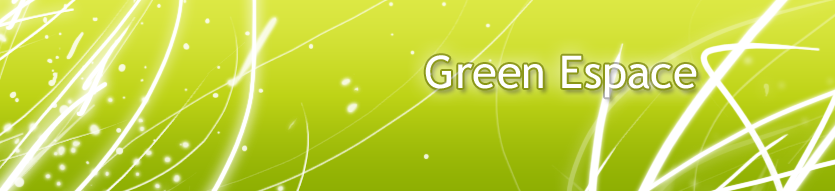
<style>
.page{position:relative;width:835px;height:191px}
.page>*{position:absolute;margin:0}
.t1{font:45px "TrebuchetMS";color:#ffffff}
</style>
<div class="page">
<p class="t1" style="left:425px;top:55px;width:272px;height:43px">Green Espace</p>
</div>
